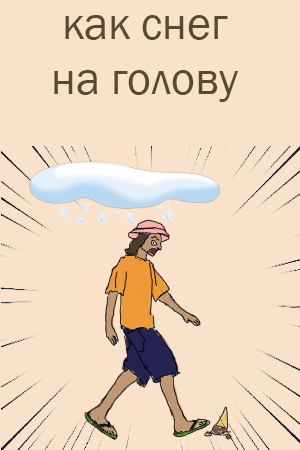
<style>
.page{position:relative;width:300px;height:450px;background:#f9e1ca}
.page>*{position:absolute;margin:0}
.t1{font:45.8px "FranklinGothic-Book";color:#5d4730}
</style>
<div class="page">
<p class="t1" style="left:54px;top:15px;width:184px;height:87px;text-align:center">как снег<br>на голову</p>
</div>
